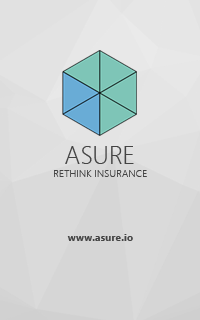
<style>
.page{position:relative;width:200px;height:320px}
.page>*{position:absolute;margin:0}
.t1{font:24.9px "SegoeUI-Light";color:#444444}
.t2{font:10.4px "SegoeUI-Light";color:#444444}
.t3{font:10.4px "SegoeUI-Bold";color:#444444}
</style>
<div class="page">
<p class="t1" style="left:65px;top:146px;width:69px;height:18px">ASURE</p>
<p class="t2" style="left:54px;top:170px;width:93px;height:7px">RETHINK INSURANCE</p>
<p class="t3" style="left:67px;top:234px;width:66px;height:7px">www.asure.io</p>
</div>
